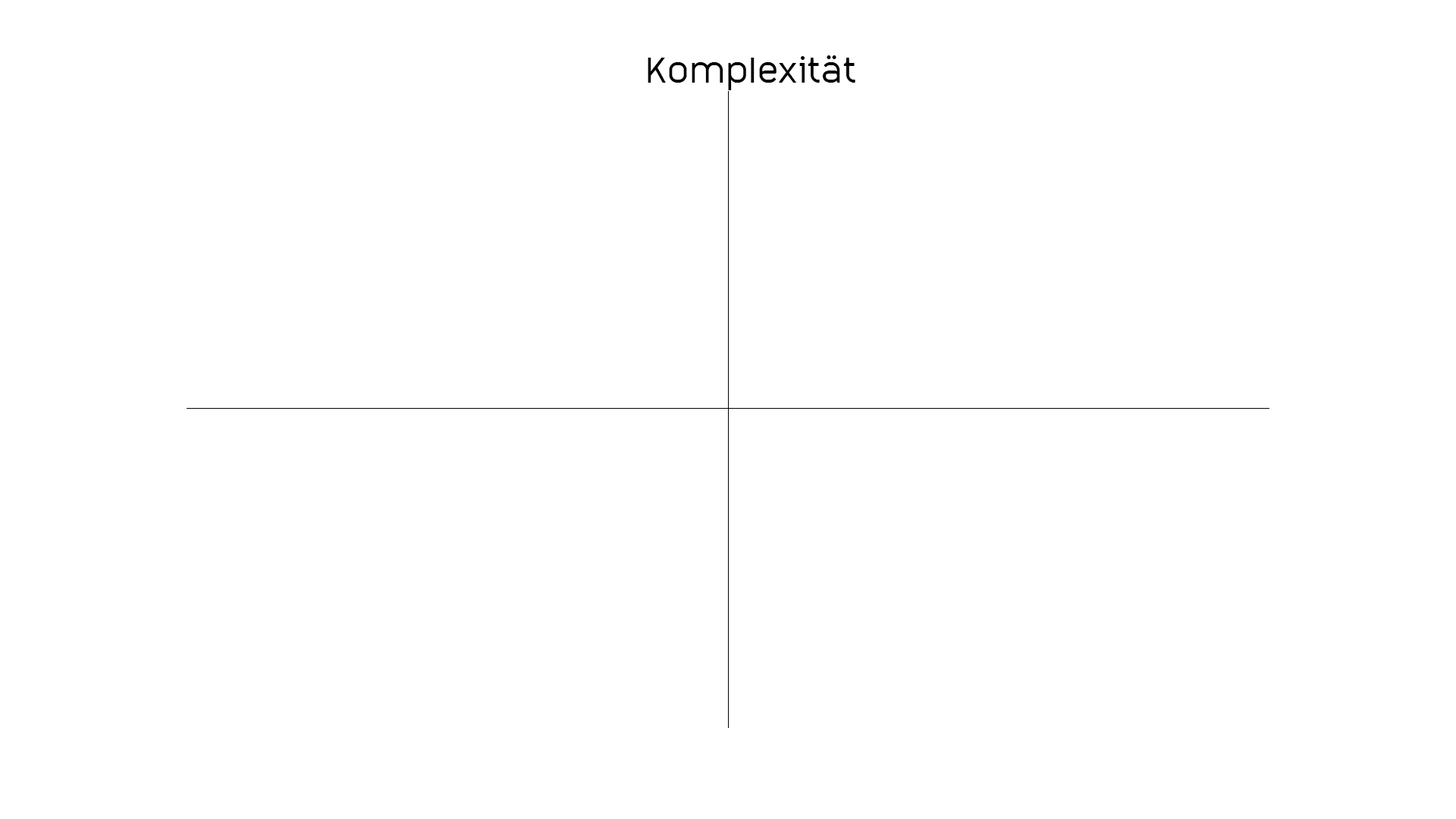
<style>
.page{position:relative;width:1456px;height:819px;background:#ffffff}
.page>*{position:absolute;margin:0}
.t1{font:37.9px "Often";color:#000000}
</style>
<div class="page">
<p class="t1" style="left:648px;top:55px;width:207px;height:35px">Komplexität</p>
</div>
